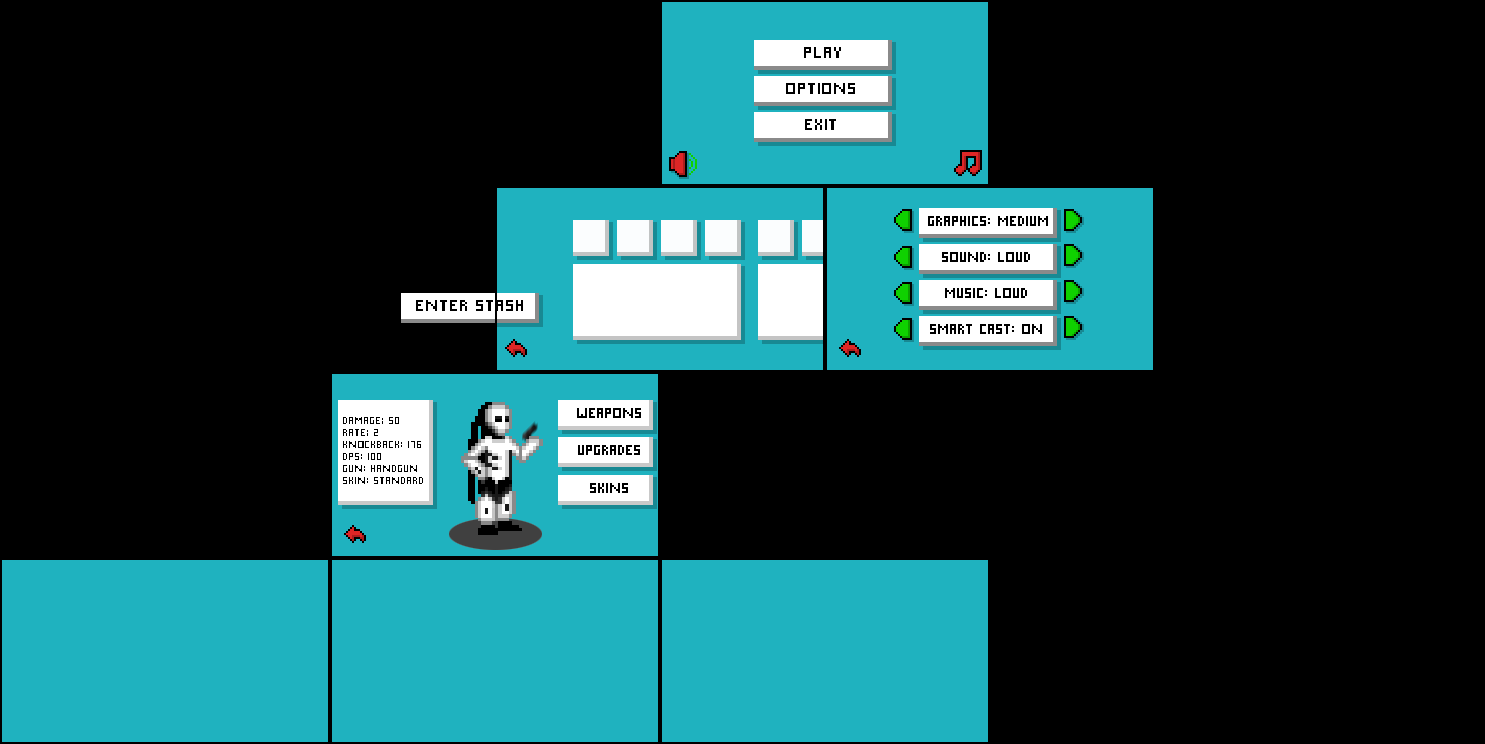
<style>
.page{position:relative;width:1485px;height:744px;background:#000000}
.page>*{position:absolute;margin:0}
.t1{font:16px "Project33-Regular";color:#000000}
.t2{font:14px "Project33-Regular";color:#000000}
.t3{font:10px "Project33-Regular";color:#000000}
</style>
<div class="page">
<p class="t1" style="left:804px;top:47px;width:37px;height:11px">Play</p>
<p class="t1" style="left:786px;top:83px;width:69px;height:11px">Options</p>
<p class="t1" style="left:805px;top:119px;width:31px;height:11px">Exit</p>
<p class="t2" style="left:928px;top:216px;width:120px;height:10px">GRaphics: Medium</p>
<p class="t2" style="left:942px;top:252px;width:88px;height:10px">Sound: Loud</p>
<p class="t2" style="left:945px;top:288px;width:82px;height:10px">Music: Loud</p>
<p class="t1" style="left:416px;top:300px;width:107px;height:11px">Enter stash</p>
<p class="t2" style="left:930px;top:324px;width:112px;height:10px">Smart cast: on</p>
<p class="t2" style="left:577px;top:408px;width:64px;height:10px">Weapons</p>
<p class="t3" style="left:343px;top:417px;width:80px;height:67px;text-align:right">damage; 50 <br>Rate; 2  <br>Knockback: 176 <br>DPS: 100<br>Gun: handgun<br>skin: standard</p>
<p class="t2" style="left:578px;top:445px;width:62px;height:10px">Upgrades</p>
<p class="t2" style="left:590px;top:483px;width:38px;height:10px">Skins</p>
</div>
